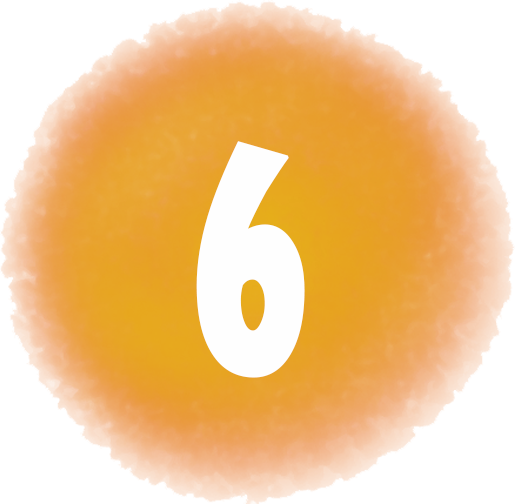
<style>
.page{position:relative;width:515px;height:504px;background:#ffffff}
.page>*{position:absolute;margin:0}
.t1{font:293px "ShowcardGothic-Reg";color:#fefefe;font-weight:bold;scale:0.72 1}
</style>
<div class="page">
<p class="t1" style="left:196px;top:141px;width:109px;height:237px">6</p>
</div>
